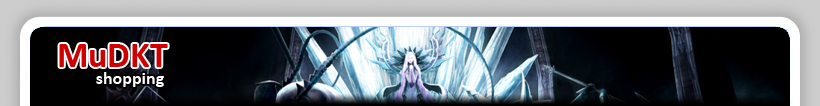
<style>
.page{position:relative;width:820px;height:106px}
.page>*{position:absolute;margin:0}
.t1{font:36px "Calibri-Bold";color:#d00000}
.t2{font:18px "Calibri-Bold";color:#ffffff}
</style>
<div class="page">
<p class="t1" style="left:59px;top:44px;width:109px;height:23px">MuDKT</p>
<p class="t2" style="left:96px;top:72px;width:68px;height:15px">shopping</p>
</div>
